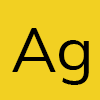
<style>
.page{position:relative;width:100px;height:100px;background:#f2d022}
.page>*{position:absolute;margin:0}
.t1{font:62.5px "Muli-Regular";color:#000000}
</style>
<div class="page">
<p class="t1" style="left:12px;top:28px;width:77px;height:57px">Ag</p>
</div>
